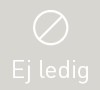
<style>
.page{position:relative;width:100px;height:90px;background:#d8d6d1}
.page>*{position:absolute;margin:0}
.t1{font:24.5px "DIN-Regular";color:#ffffff}
</style>
<div class="page">
<p class="t1" style="left:13px;top:60px;width:75px;height:24px">Ej ledig</p>
</div>
